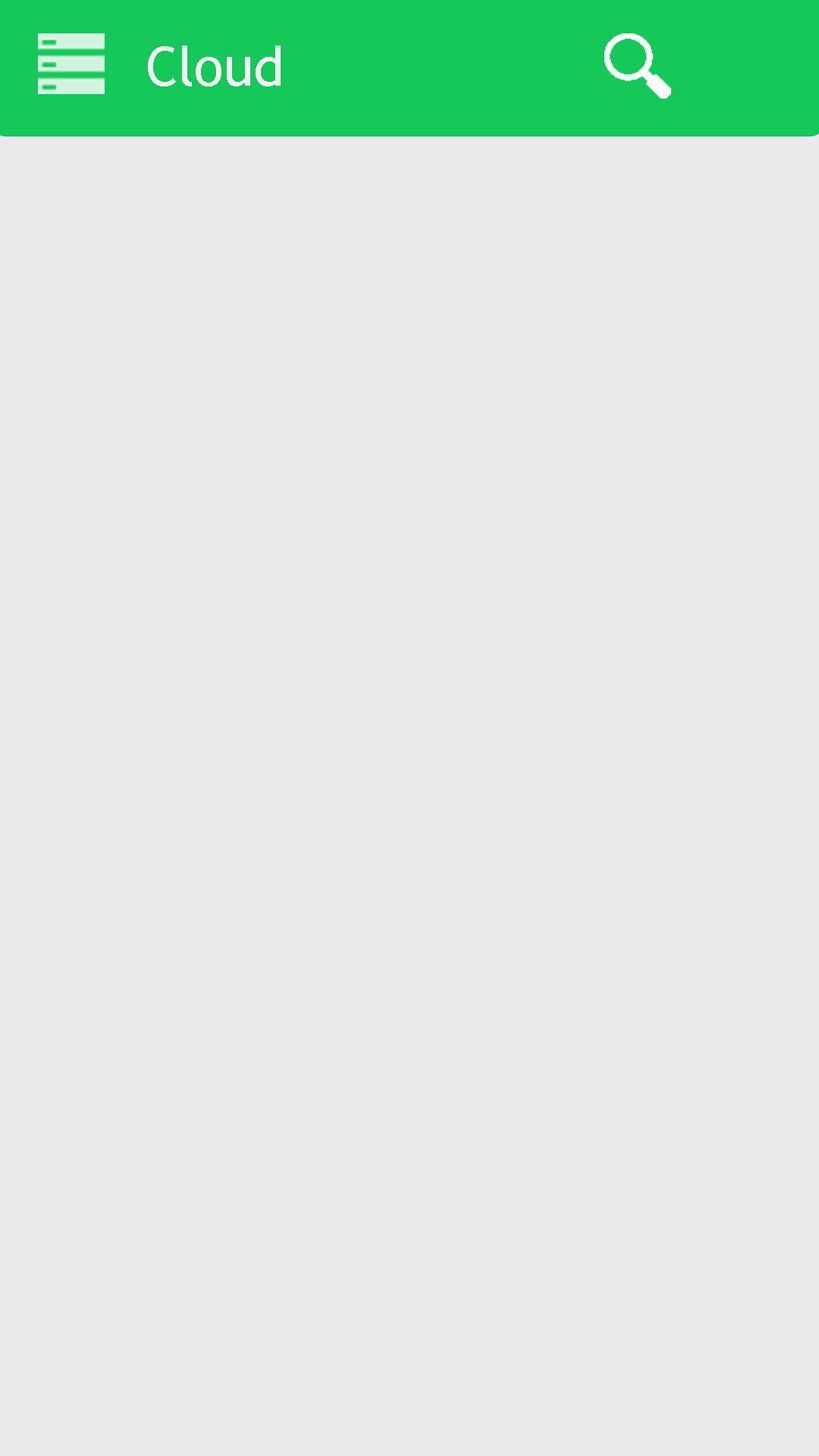
<style>
.page{position:relative;width:819px;height:1456px;background:#ebebeb}
.page>*{position:absolute;margin:0}
.t1{font:54.6px "TrebuchetMS";color:#f1f1f1}
</style>
<div class="page">
<p class="t1" style="left:148px;top:45px;width:133px;height:41px">Cloud</p>
</div>
